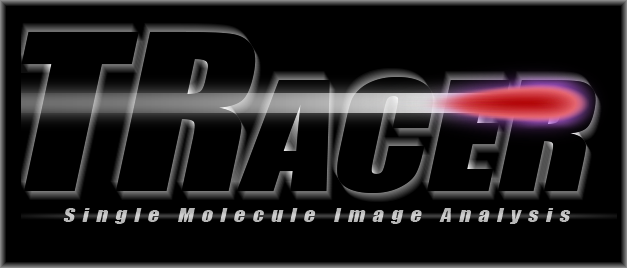
<style>
.page{position:relative;width:627px;height:268px;background:#000000}
.page>*{position:absolute;margin:0}
.t1{font:18px "Impact";letter-spacing:0.34em;color:#bcbcbc;font-style:italic;scale:1.23 1}
</style>
<div class="page">
<p class="t1" style="left:63px;top:208px;width:508px;height:16px">Single Molecule Image Analysis</p>
</div>
